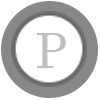
<style>
.page{position:relative;width:100px;height:100px;background:#ffffff}
.page>*{position:absolute;margin:0}
.t1{font:48px "CenturySchoolbook";color:#c0c0c0}
</style>
<div class="page">
<p class="t1" style="left:36px;top:33px;width:30px;height:35px">P</p>
</div>
